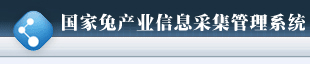
<style>
.page{position:relative;width:310px;height:64px}
.page>*{position:absolute;margin:0}
.t1{font:18px "¾­µäÌØËÎ¼ò Regular";letter-spacing:0.05em;color:#ffffff}
</style>
<div class="page">
<p class="t1" style="left:62px;top:13px;width:243px;height:18px">国家兔产业信息采集管理系统</p>
</div>
